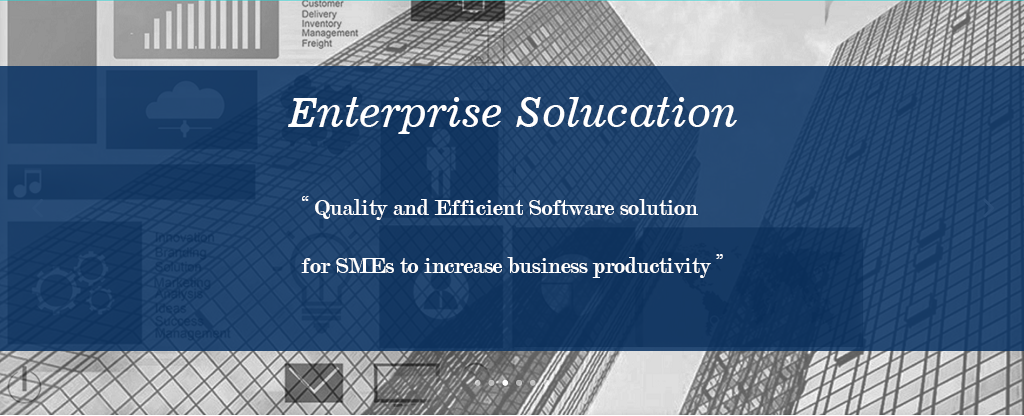
<style>
.page{position:relative;width:1024px;height:416px}
.page>*{position:absolute;margin:0}
.t1{font:40px "News701BT-ItalicA";color:#ffffff}
.t2{font:24px "Modern-Regular";color:#ffffff}
</style>
<div class="page">
<p class="t1" style="left:288px;top:97px;width:449px;height:37px">Enterprise Solucation</p>
<p class="t2" style="left:301px;top:196px;width:422px;height:82px">“ Quality and Efficient Software solution <br><br>for SMEs to increase business productivity ”</p>
</div>
